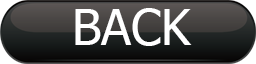
<style>
.page{position:relative;width:256px;height:64px}
.page>*{position:absolute;margin:0}
.t1{font:50px "Tahoma";color:#ffffff}
</style>
<div class="page">
<p class="t1" style="left:75px;top:8px;width:117px;height:38px">BACK</p>
</div>
